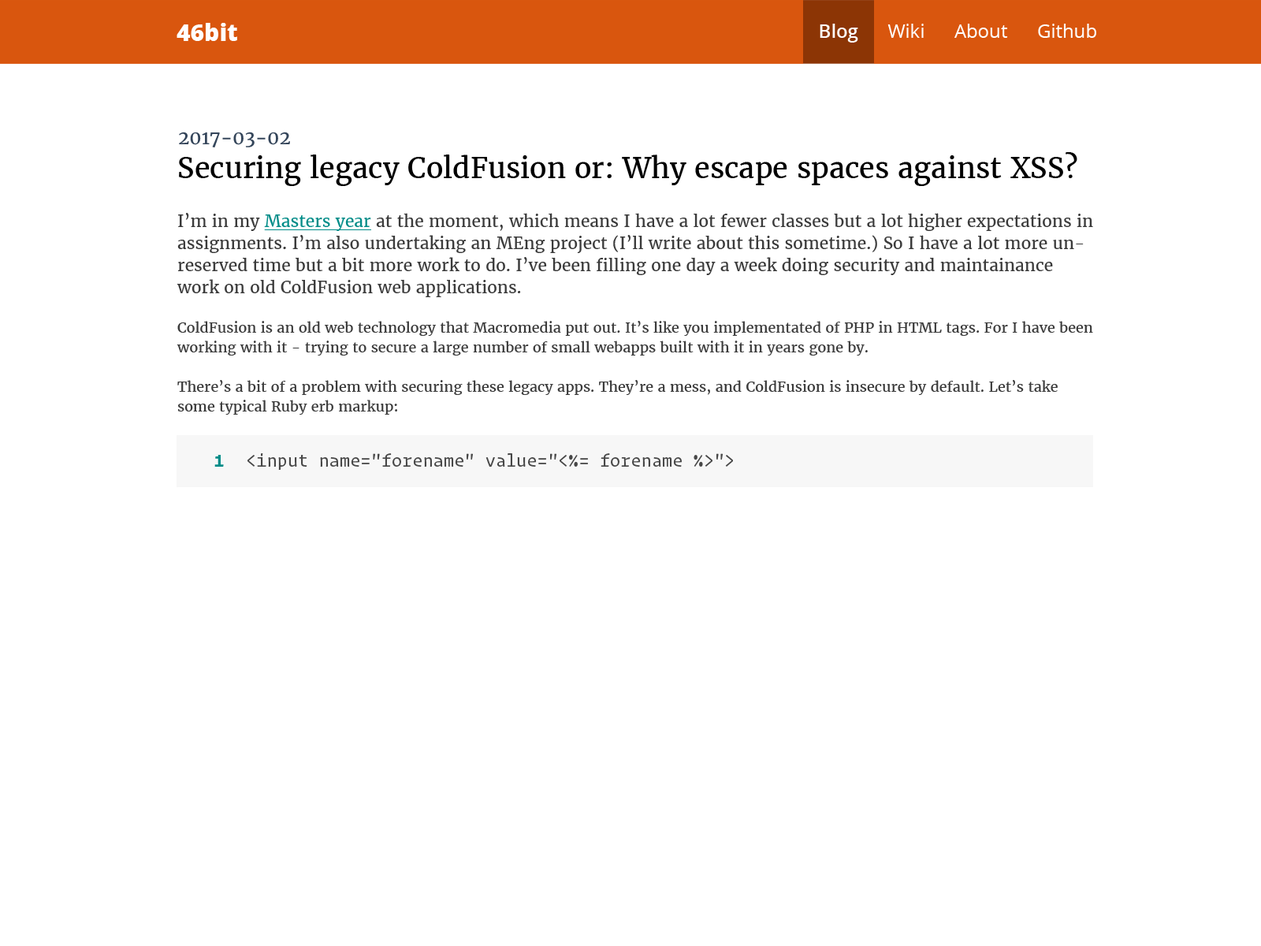
<style>
.page{position:relative;width:1261px;height:946px;background:#ffffff}
.page>*{position:absolute;margin:0}
.t1{font:23.6px "OpenSans-Extrabold";color:#ffffff}
.t2{font:18.9px "OpenSans";color:#ffffff}
.t3{font:18.9px "OpenSans-Semibold";color:#ffffff}
.t4{font:18.9px "Merriweather-Regular";color:#35465b}
.t5{font:28.4px "Merriweather-Regular";color:#000000}
.t6{font:14.2px/19.7px "Merriweather-Regular";color:#3b3b3b}
.t7{font:16.5px/22.1px "Merriweather-Regular";color:#3b3b3b}
.t8{font:16.5px/22.1px "Merriweather-Regular";color:#008c88;text-decoration:underline}
.t9{font:18.9px "OperatorMono-Bold";color:#008c88}
.t10{font:18.9px "OperatorMono-Book";color:#474747}
</style>
<div class="page">
<p class="t1" style="left:177px;top:23px;width:60px;height:18px">46bit</p>
<p class="t2" style="left:820px;top:24px;width:276px;height:19px"><span class="t3">Blog</span>      Wiki      About      Github</p>
<p class="t4" style="left:179px;top:132px;width:111px;height:15px">2017-03-02</p>
<p class="t5" style="left:179px;top:152px;width:898px;height:34px">Securing legacy ColdFusion or: Why escape spaces against XSS?</p>
<p class="t6" style="left:177px;top:213px;width:916px;height:202px"><span class="t7">I’m in my </span><span class="t8">Masters year</span><span class="t7"> at the moment, which means I have a lot fewer classes but a lot higher expectations in assignments. I’m also undertaking an MEng project (I’ll write about this sometime.) So I have a lot more unreserved time but a bit more work to do. I’ve been filling one day a week doing security and maintainance work on old ColdFusion web applications.<br></span><br>ColdFusion is an old web technology that Macromedia put out. It’s like you implementated of PHP in HTML tags. For I have been working with it - trying to secure a large number of small webapps built with it in years gone by.<br><br>There’s a bit of a problem with securing these legacy apps. They’re a mess, and ColdFusion is insecure by default. Let’s take some typical Ruby erb markup:</p>
<p class="t9" style="left:214px;top:455px;width:10px;height:12px">1</p>
<p class="t10" style="left:247px;top:453px;width:486px;height:17px">&lt;input name="forename" value="&lt;%= forename %&gt;"&gt;</p>
</div>
